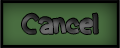
<style>
.page{position:relative;width:120px;height:48px}
.page>*{position:absolute;margin:0}
.t1{font:32px "Animated"}
</style>
<div class="page">
<p class="t1" style="left:22px;top:13px;width:76px;height:21px">Cancel</p>
</div>
